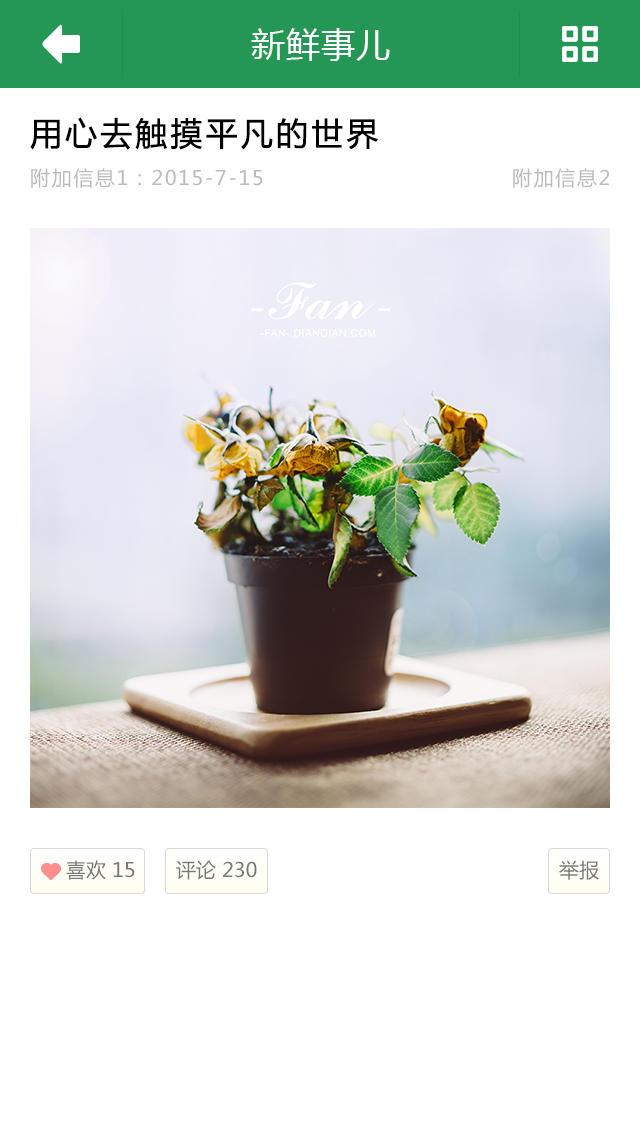
<style>
.page{position:relative;width:640px;height:1136px;background:#ffffff}
.page>*{position:absolute;margin:0}
.t1{font:32px "MicrosoftYaHei";letter-spacing:0.08em;color:#000000;font-weight:bold}
.t2{font:20px "MicrosoftYaHei";letter-spacing:0.08em;color:#bbbbbb}
.t3{font:20px "MicrosoftYaHei";color:#777777}
</style>
<div class="page">
<p class="t1" style="left:30px;top:117px;width:348px;height:33px">用心去触摸平凡的世界</p>
<p class="t2" style="left:31px;top:168px;width:232px;height:20px">附加信息1：2015-7-15</p>
<p class="t2" style="left:513px;top:168px;width:96px;height:20px">附加信息2</p>
<p class="t3" style="left:66px;top:860px;width:69px;height:20px">喜欢 15</p>
<p class="t3" style="left:176px;top:860px;width:81px;height:20px">评论 230</p>
<p class="t3" style="left:559px;top:860px;width:40px;height:20px">举报</p>
</div>
